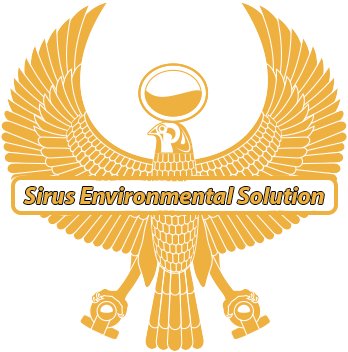
<style>
.page{position:relative;width:348px;height:352px;background:#ffffff}
.page>*{position:absolute;margin:0}
.t1{font:24px "MyriadPro-BoldIt";color:#eeb03e}
</style>
<div class="page">
<p class="t1" style="left:24px;top:187px;width:300px;height:17px">Sirus Environmental Solution</p>
</div>
